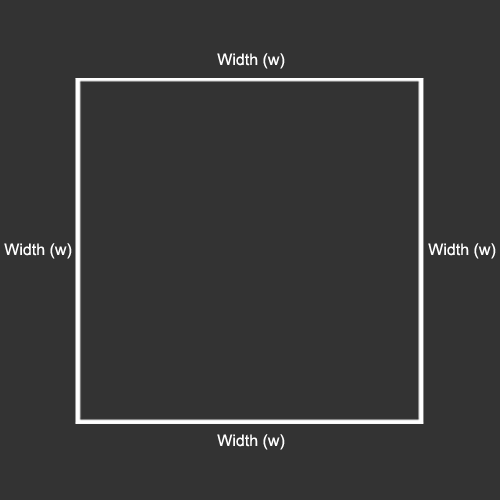
<style>
.page{position:relative;width:500px;height:500px;background:#333333}
.page>*{position:absolute;margin:0}
.t1{font:16px "ArialMT";color:#ffffff}
</style>
<div class="page">
<p class="t1" style="left:217px;top:53px;width:68px;height:16px">Width (w)</p>
<p class="t1" style="left:4px;top:243px;width:68px;height:16px">Width (w)</p>
<p class="t1" style="left:428px;top:243px;width:68px;height:16px">Width (w)</p>
<p class="t1" style="left:217px;top:434px;width:68px;height:16px">Width (w)</p>
</div>
